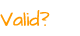
<style>
.page{position:relative;width:80px;height:36px;background:#ffffff}
.page>*{position:absolute;margin:0}
.t1{font:16px "ArchitectsDaughter";color:#ff9900}
</style>
<div class="page">
<p class="t1" style="left:0px;top:10px;width:50px;height:16px">Valid?</p>
</div>
